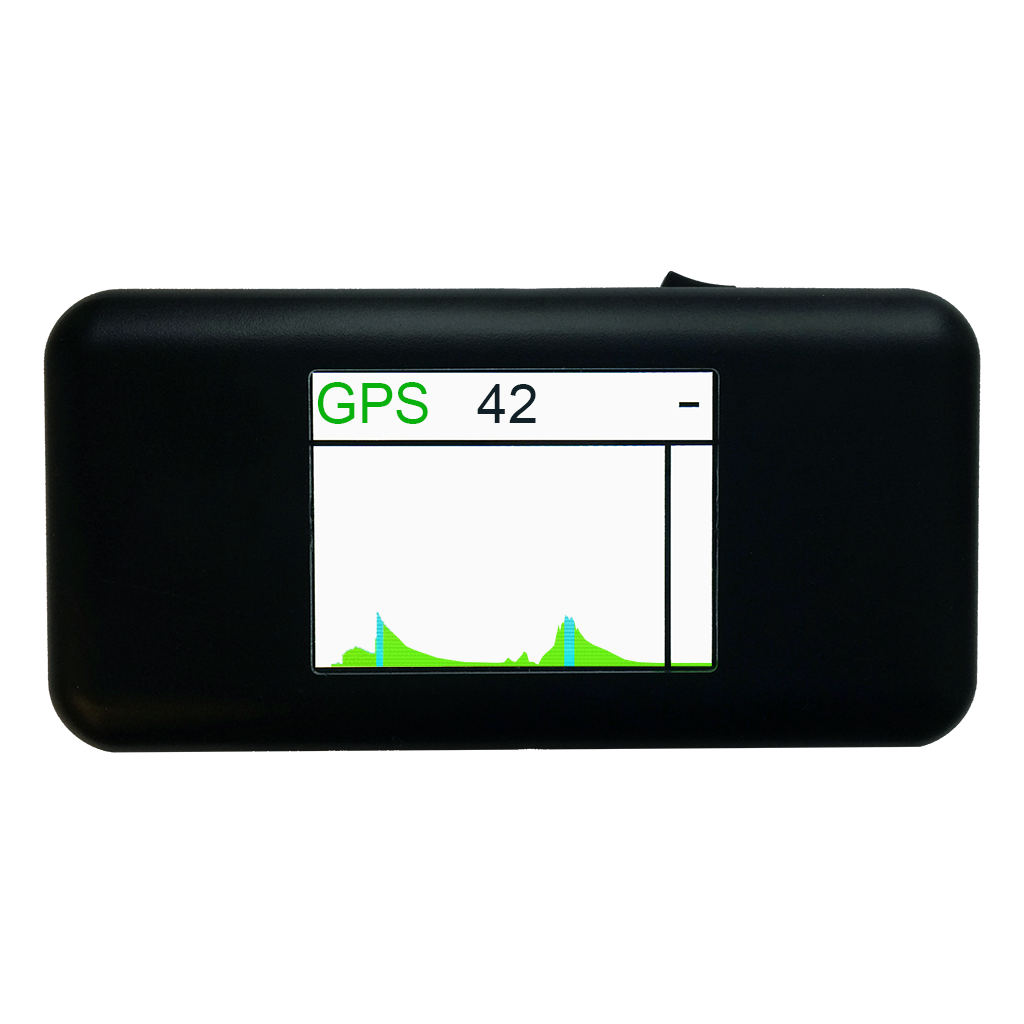
<style>
.page{position:relative;width:1024px;height:1024px;background:#ffffff}
.page>*{position:absolute;margin:0}
.t1{font:54.6px "ArialMT";color:#09b10d}
.t2{font:54.6px "ArialMT";color:#112026}
</style>
<div class="page">
<p class="t1" style="left:317px;top:382px;width:111px;height:42px">GPS</p>
<p class="t2" style="left:477px;top:384px;width:59px;height:39px">42</p>
</div>
